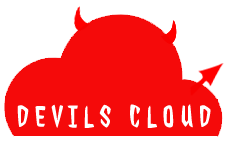
<style>
.page{position:relative;width:230px;height:143px;background:#f50a0a}
.page>*{position:absolute;margin:0}
.t1{font:30px "JollyLodger";letter-spacing:0.215em;color:#ffffff}
</style>
<div class="page">
<p class="t1" style="left:17px;top:104px;width:194px;height:24px">DEVILS CLOUD</p>
</div>
